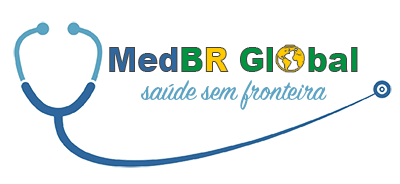
<style>
.page{position:relative;width:400px;height:184px;background:#ffffff}
.page>*{position:absolute;margin:0}
.t1{font:35.2px "Arial-Black";color:#009440;scale:0.89 1}
.t2{font:35.2px "Arial-Black";color:#30679e;scale:0.89 1}
.t3{font:35.2px "Arial-Black";color:#ffcb00;scale:0.89 1}
.t4{font:31px "SignPainter-HouseScript";color:#5da3c3;scale:0.95 1}
</style>
<div class="page">
<p class="t1" style="left:109px;top:47px;width:249px;height:25px"><span class="t2">Med</span>B<span class="t3">R </span>Gl   bal</p>
<p class="t4" style="left:141px;top:80px;width:186px;height:30px">saúde sem fronteira</p>
</div>
